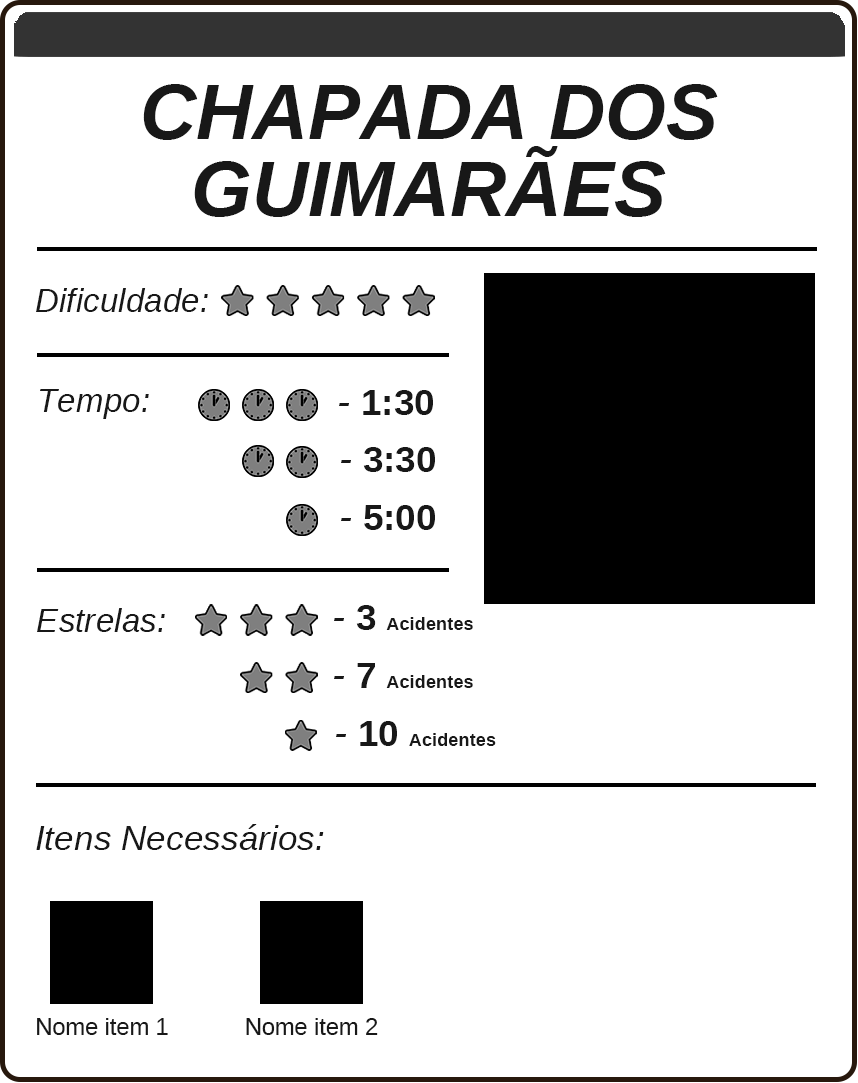
<style>
.page{position:relative;width:858px;height:1083px;background:#ffffff}
.page>*{position:absolute;margin:0}
.t1{font:77.6px/77.3px "LiberationSans-BoldItalic";color:#181818}
.t2{font:33.3px "LiberationSans-Italic";color:#181818}
.t3{font:36.6px "LiberationSans-Bold";color:#181818}
.t4{font:39.4px "LiberationSans-Italic";color:#181818}
.t5{font:18.3px "LiberationSans-Bold";color:#181818}
.t6{font:35.3px "LiberationSans-Italic";color:#181818}
.t7{font:23.5px "LiberationSans-Regular";color:#181818}
</style>
<div class="page">
<p class="t1" style="left:143px;top:84px;width:575px;height:133px;text-align:center">CHAPADA DOS<br>GUIMARÃES</p>
<p class="t2" style="left:36px;top:288px;width:172px;height:24px">Dificuldade:</p>
<p class="t2" style="left:40px;top:389px;width:109px;height:30px">Tempo:</p>
<p class="t3" style="left:339px;top:390px;width:94px;height:25px"><span class="t4">- </span>1:30</p>
<p class="t3" style="left:341px;top:447px;width:94px;height:25px"><span class="t4">- </span>3:30</p>
<p class="t3" style="left:341px;top:505px;width:94px;height:25px"><span class="t4">- </span>5:00</p>
<p class="t5" style="left:334px;top:605px;width:139px;height:25px"><span class="t4">- </span><span class="t3">3 </span>Acidentes</p>
<p class="t2" style="left:37px;top:608px;width:128px;height:24px">Estrelas:</p>
<p class="t5" style="left:334px;top:663px;width:139px;height:25px"><span class="t4">- </span><span class="t3">7 </span>Acidentes</p>
<p class="t5" style="left:336px;top:721px;width:160px;height:25px"><span class="t4">- </span><span class="t3">10 </span>Acidentes</p>
<p class="t6" style="left:36px;top:824px;width:288px;height:26px">Itens Necessários:</p>
<p class="t7" style="left:37px;top:1018px;width:131px;height:17px">Nome item 1</p>
<p class="t7" style="left:246px;top:1018px;width:132px;height:17px">Nome item 2</p>
</div>
